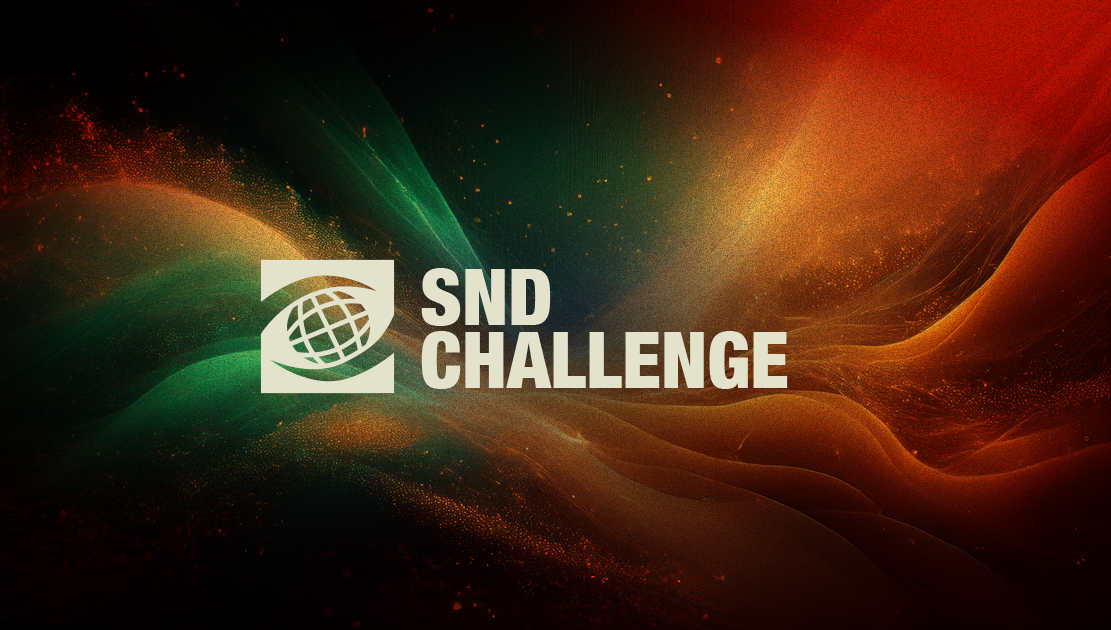
<style>
.page{position:relative;width:1111px;height:630px}
.page>*{position:absolute;margin:0}
.t1{font:77.8px "HelveticaNeue-CondensedBlack";color:#e3e3cd;text-transform:uppercase}
</style>
<div class="page">
<p class="t1" style="left:421px;top:268px;width:130px;height:58px">SND</p>
<p class="t1" style="left:421px;top:331px;width:367px;height:58px">challenge</p>
</div>
